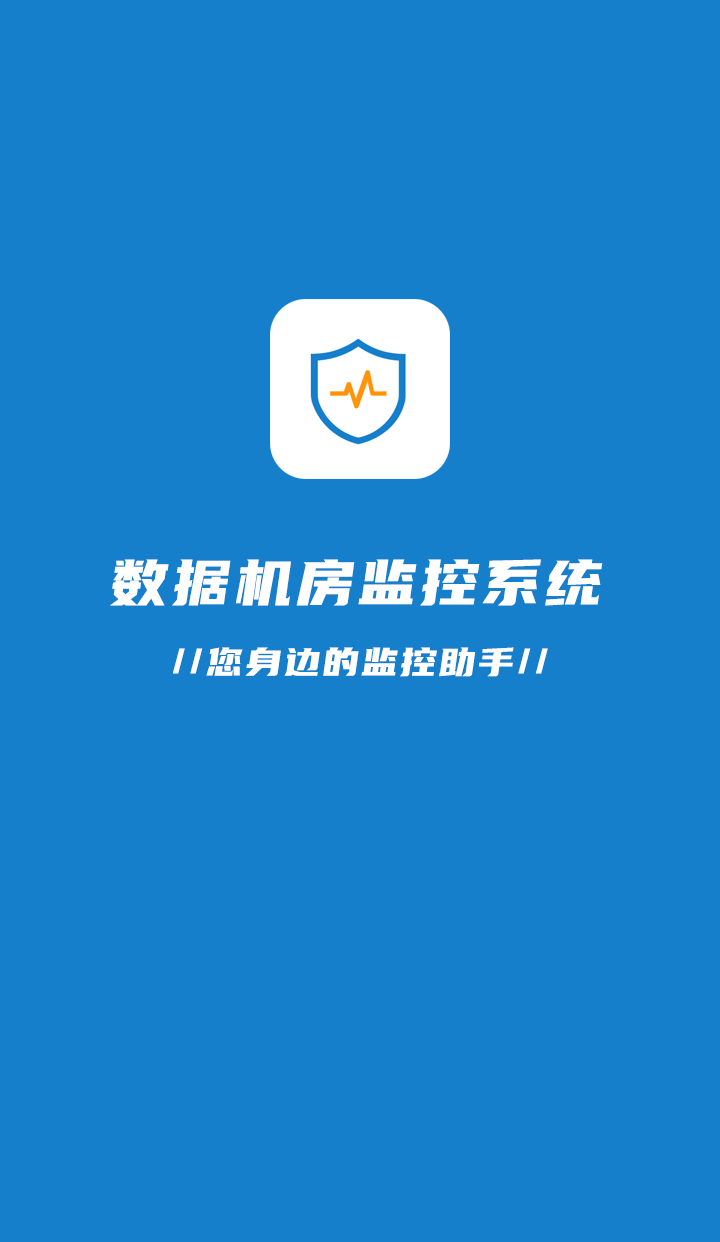
<style>
.page{position:relative;width:720px;height:1242px;background:#157fcc}
.page>*{position:absolute;margin:0}
.t1{font:64px "YouSheBiaoTiHei";letter-spacing:0.05em;color:#ffffff}
.t2{font:40px "YouSheBiaoTiHei";letter-spacing:0.05em;color:#ffffff}
</style>
<div class="page">
<p class="t1" style="left:110px;top:559px;width:493px;height:47px">数据机房监控系统</p>
<p class="t2" style="left:172px;top:647px;width:376px;height:30px">//您身边的监控助手//</p>
</div>
